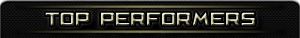
<style>
.page{position:relative;width:300px;height:38px}
.page>*{position:absolute;margin:0}
.t1{font:16.8px "CafeNeroM54";letter-spacing:0.05em}
</style>
<div class="page">
<p class="t1" style="left:45px;top:12px;width:210px;height:14px">Top  performers</p>
</div>
